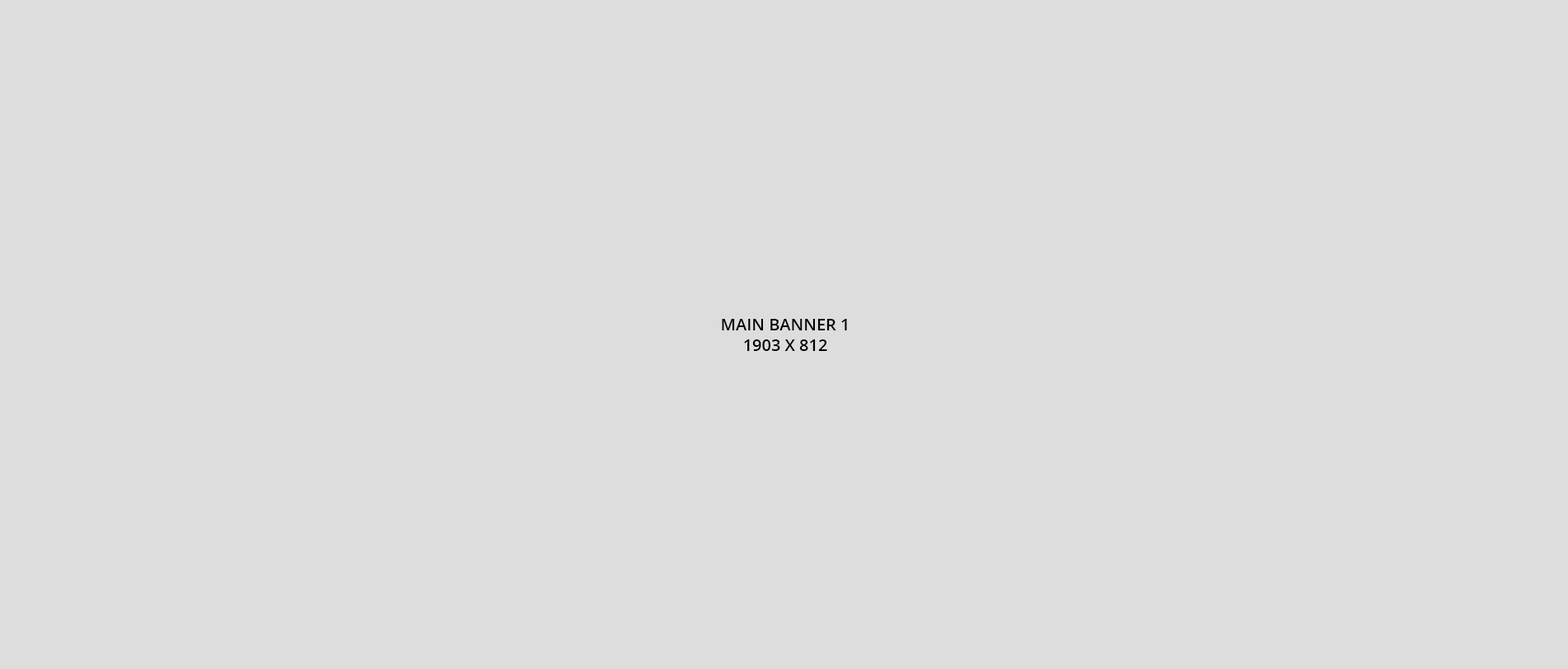
<style>
.page{position:relative;width:1568px;height:669px;background:#dddddd}
.page>*{position:absolute;margin:0}
.t1{font:16.5px/20.6px "OpenSans-Semibold";color:#000000;text-transform:uppercase}
</style>
<div class="page">
<p class="t1" style="left:722px;top:319px;width:125px;height:32px;text-align:center">main banner 1<br>1903 x 812</p>
</div>
